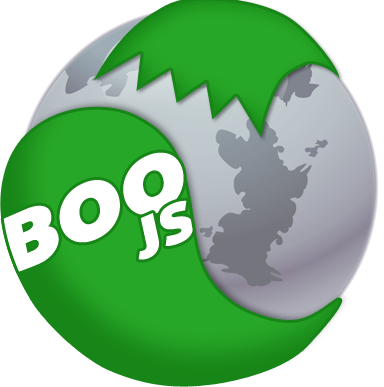
<style>
.page{position:relative;width:384px;height:387px;background:#ffffff}
.page>*{position:absolute;margin:0}
.t1{font:75.4px "PaytoneOne";color:#ffffff;font-weight:bold;font-style:italic;scale:1.11 1}
.t2{font:54px "PaytoneOne";color:#ffffff;font-style:italic;scale:1.11 1}
</style>
<div class="page">
<p class="t1" style="left:0px;top:152px;width:184px;height:122px;rotate:-23deg">BOO</p>
<p class="t2" style="left:138px;top:200px;width:55px;height:60px;rotate:-23deg">JS</p>
</div>
